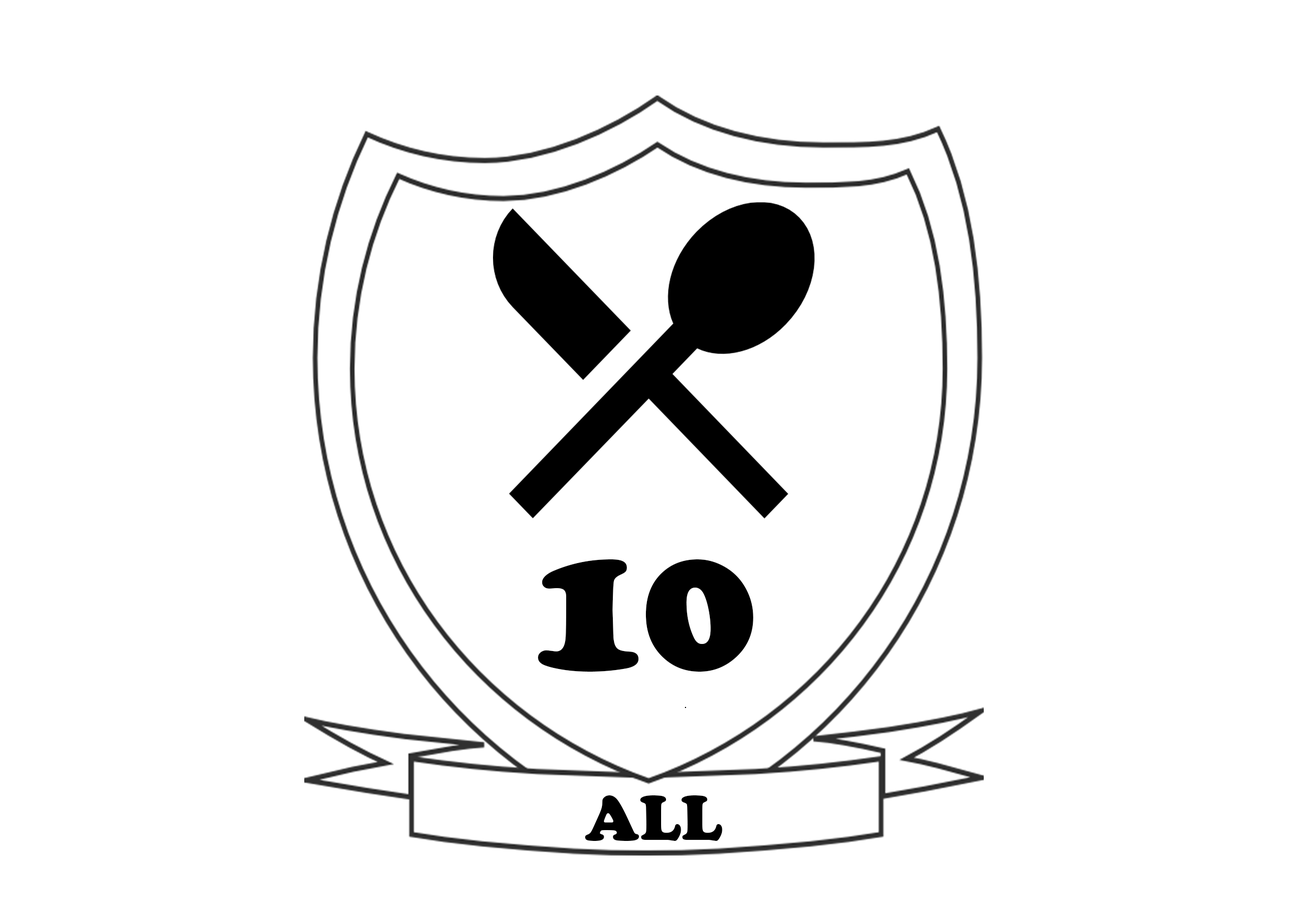
<style>
.page{position:relative;width:1307px;height:912px;background:#ffffff}
.page>*{position:absolute;margin:0}
.t1{font:195.3px "CooperBlack";color:#000000}
.t2{font:65.1px "CooperBlack";color:#000000}
</style>
<div class="page">
<p class="t1" style="left:538px;top:559px;width:216px;height:113px">10</p>
<p class="t2" style="left:585px;top:795px;width:138px;height:46px">ALL</p>
</div>
